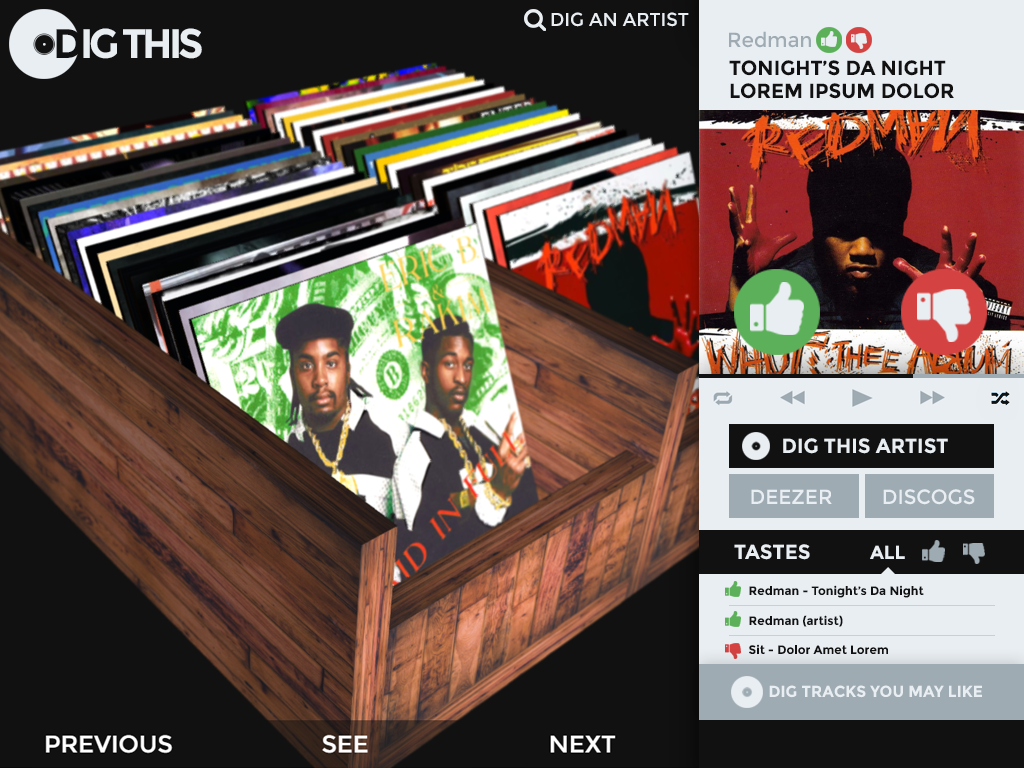
<style>
.page{position:relative;width:1024px;height:768px;background:#111111}
.page>*{position:absolute;margin:0}
.t1{font:18.8px "Montserrat-Regular";color:#e9eef2;text-transform:uppercase}
.t2{font:41.2px "Montserrat-Bold";letter-spacing:-0.1em;color:#e9eef2;text-transform:uppercase}
.t3{font:41.2px "Montserrat-Bold";letter-spacing:-0.1em;color:#111111;text-transform:uppercase}
.t4{font:20.6px "Montserrat-Regular";color:#9fabb3}
.t5{font:20.6px/18.5px "Montserrat-Bold";color:#111111;text-transform:uppercase}
.t6{font:20.6px "Montserrat-Bold";color:#e9eef2;text-transform:uppercase}
.t7{font:20.6px "Montserrat-Regular";color:#e9eef2;text-transform:uppercase}
.t8{font:19.1px "Montserrat-Bold";color:#e9eef2;text-transform:uppercase}
.t9{font:12.4px "Montserrat-Bold";color:#111111}
.t10{font:16.1px "Montserrat-Bold";color:#e9eef2;text-transform:uppercase}
</style>
<div class="page">
<p class="t1" style="left:551px;top:12px;width:138px;height:15px">dig an artist</p>
<p class="t2" style="left:56px;top:28px;width:146px;height:31px"><span class="t3">D</span>IG THIS</p>
<p class="t4" style="left:729px;top:31px;width:82px;height:17px">Redman</p>
<p class="t5" style="left:729px;top:60px;width:225px;height:39px">Tonight’s da night <br>lorem ipsum dolor</p>
<p class="t6" style="left:783px;top:438px;width:165px;height:16px">Dig this artist</p>
<p class="t7" style="left:751px;top:489px;width:224px;height:16px">DEEZER         DISCOGS</p>
<p class="t6" style="left:734px;top:544px;width:76px;height:16px">TASTES</p>
<p class="t8" style="left:870px;top:545px;width:35px;height:14px">ALL</p>
<p class="t9" style="left:749px;top:585px;width:175px;height:13px">Redman - Tonight’s Da Night</p>
<p class="t9" style="left:749px;top:615px;width:94px;height:12px">Redman (artist)</p>
<p class="t9" style="left:749px;top:644px;width:139px;height:10px">Sit - Dolor Amet Lorem</p>
<p class="t10" style="left:769px;top:685px;width:213px;height:13px">Dig tracks YOU MAY LIKE</p>
</div>
